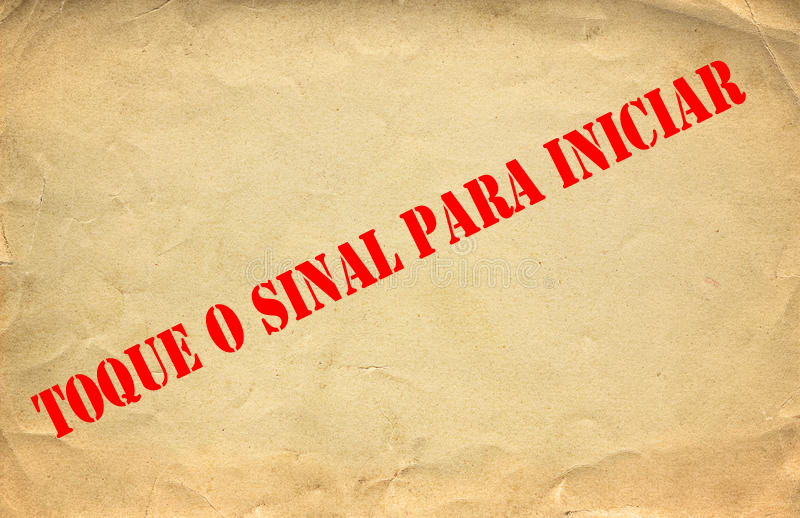
<style>
.page{position:relative;width:800px;height:518px}
.page>*{position:absolute;margin:0}
.t1{font:65.4px "StencilStd";color:#ff0000;scale:0.75 1}
</style>
<div class="page">
<p class="t1" style="left:30px;top:60px;width:716px;height:378px;rotate:-26deg">TOQUE O SINAL PARA INICIAR</p>
</div>
